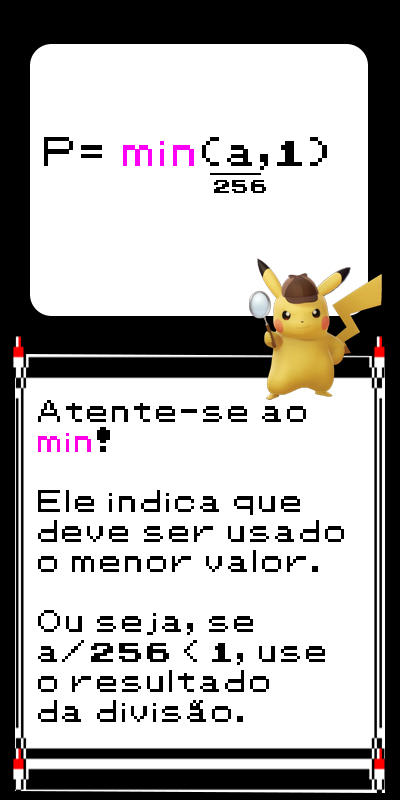
<style>
.page{position:relative;width:400px;height:800px;background:#ffffff}
.page>*{position:absolute;margin:0}
.t1{font:33.3px "Pokemon-Classic";color:#000000}
.t2{font:37.5px "Pokemon-Classic";color:#000000}
.t3{font:33.3px "Pokemon-Classic";color:#ff00f6}
.t4{font:16.7px "Pokemon-Classic";color:#000000}
.t5{font:25px "Pokemon-Classic";color:#000000}
.t6{font:25px "Pokemon-Classic";color:#ff00e4}
</style>
<div class="page">
<p class="t1" style="left:44px;top:137px;width:283px;height:33px"><span class="t2"><br><br> </span>P= <span class="t3">min</span>(a,1)</p>
<p class="t4" style="left:214px;top:180px;width:52px;height:13px">256</p>
<p class="t5" style="left:38px;top:400px;width:306px;height:322px">Atente-se ao<br><span class="t6">min</span>!<br><br>Ele indica que<br>deve ser usado<br>o menor valor.<br><br>Ou seja, se <br>a/256 &lt; 1, use<br>o resultado <br>da divisão.</p>
</div>
